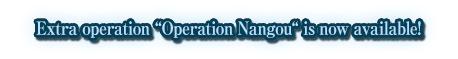
<style>
.page{position:relative;width:458px;height:59px;background:#ffffff}
.page>*{position:absolute;margin:0}
.t1{font:18px "RyuminPro-ExBold";letter-spacing:-0.04em;color:#b9e0ff;scale:0.9 1}
</style>
<div class="page">
<p class="t1" style="left:36px;top:21px;width:385px;height:17px">Extra operation “Operation Nangou“ is now available!</p>
</div>
